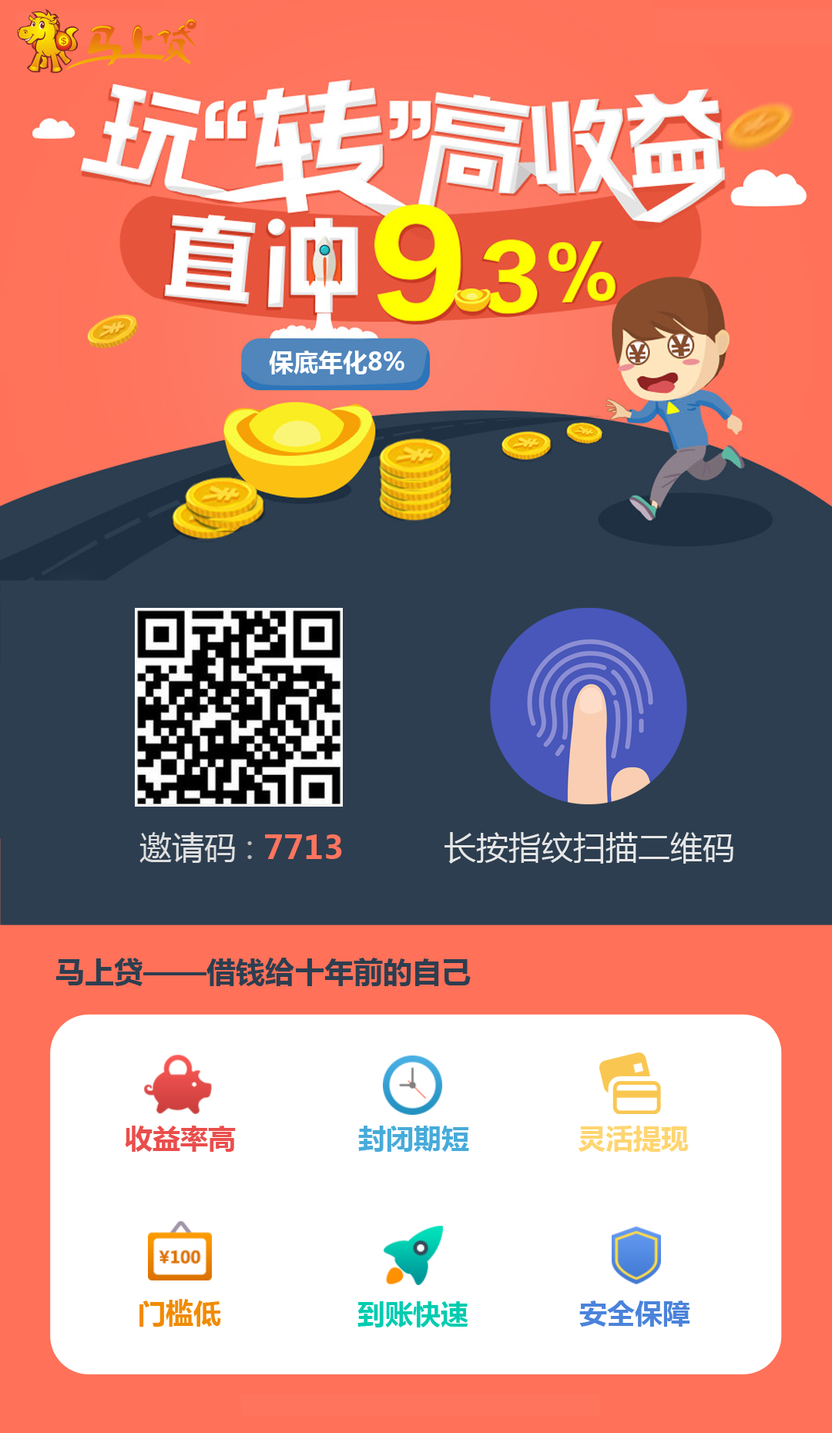
<style>
.page{position:relative;width:832px;height:1433px;background:#2d3e50}
.page>*{position:absolute;margin:0}
.t1{font:24.6px "MicrosoftYaHei-Bold";color:#ffffff}
.t2{font:32.4px "MicrosoftYaHei-Bold";color:#ff745d}
.t3{font:32.4px "MicrosoftYaHei";color:#dedede}
.t4{font:32.4px "MicrosoftYaHei";color:#bcbcbc}
.t5{font:32.4px "MicrosoftYaHei";color:#e6e6e6}
.t6{font:29.3px "MicrosoftYaHei-Bold";color:#2d3e50}
.t7{font:27.7px "MicrosoftYaHei-Bold";color:#e94e4c}
.t8{font:27.7px "MicrosoftYaHei-Bold";color:#47abda}
.t9{font:27.7px "MicrosoftYaHei-Bold";color:#ffd571}
.t10{font:27.7px "MicrosoftYaHei-Bold";color:#f18c00}
.t11{font:27.7px "MicrosoftYaHei-Bold";color:#00ccb0}
.t12{font:27.7px "MicrosoftYaHei-Bold";color:#4a83db}
</style>
<div class="page">
<p class="t1" style="left:269px;top:351px;width:135px;height:23px">保底年化8%</p>
<p class="t2" style="left:139px;top:832px;width:203px;height:31px"><span class="t3">邀请码</span><span class="t4"> : </span>7713</p>
<p class="t5" style="left:445px;top:832px;width:288px;height:32px">长按指纹扫描二维码</p>
<p class="t6" style="left:55px;top:958px;width:416px;height:28px">马上贷——借钱给十年前的自己</p>
<p class="t7" style="left:125px;top:1126px;width:111px;height:26px">收益率高</p>
<p class="t8" style="left:358px;top:1126px;width:111px;height:26px">封闭期短</p>
<p class="t9" style="left:578px;top:1126px;width:111px;height:26px">灵活提现</p>
<p class="t10" style="left:139px;top:1299px;width:82px;height:28px">门槛低</p>
<p class="t11" style="left:357px;top:1301px;width:111px;height:26px">到账快速</p>
<p class="t12" style="left:579px;top:1301px;width:111px;height:26px">安全保障</p>
</div>
